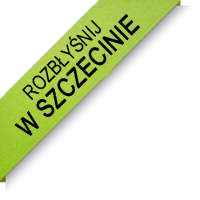
<style>
.page{position:relative;width:200px;height:200px;background:#ffffff}
.page>*{position:absolute;margin:0}
.t1{font:25.8px/24px "ArialNarrow";color:#000000;font-weight:bold}
.t2{font:20px/24px "ArialNarrow";color:#000000}
</style>
<div class="page">
<p class="t1" style="left:14px;top:14px;width:126px;height:122px;text-align:center;rotate:-45deg"><span class="t2">ROZBŁYŚNIJ<br></span>W SZCZECINIE</p>
</div>
